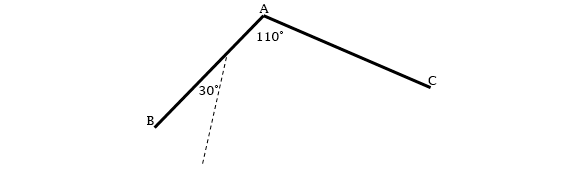
<style>
.page{position:relative;width:576px;height:182px;background:#ffffff}
.page>*{position:absolute;margin:0}
.t1{font:12.5px "LucidaFax";color:#000000}
</style>
<div class="page">
<p class="t1" style="left:259px;top:4px;width:10px;height:9px">A</p>
<p class="t1" style="left:257px;top:31px;width:26px;height:10px">110°</p>
<p class="t1" style="left:428px;top:76px;width:9px;height:9px">C</p>
<p class="t1" style="left:199px;top:85px;width:19px;height:10px">30°</p>
<p class="t1" style="left:147px;top:116px;width:7px;height:9px">B</p>
</div>
